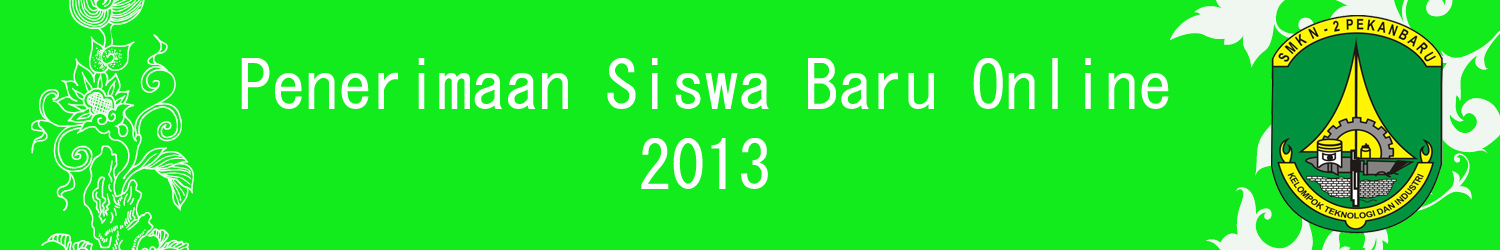
<style>
.page{position:relative;width:1500px;height:250px;background:#12eb1c}
.page>*{position:absolute;margin:0}
.t1{font:66.7px "MS-Gothic";color:#fffefe}
.t2{font:66.7px "OCRAExtended";color:#fffefe}
</style>
<div class="page">
<p class="t1" style="left:241px;top:58px;width:928px;height:131px;text-align:center">Penerimaan Siswa Baru Online 2013<br><span class="t2">SMK Negeri 2 Pekanbaru</span></p>
</div>
